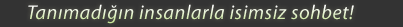
<style>
.page{position:relative;width:403px;height:27px;background:#333333}
.page>*{position:absolute;margin:0}
.t1{font:20px "MyriadPro-It";letter-spacing:0.03em}
</style>
<div class="page">
<p class="t1" style="left:28px;top:4px;width:326px;height:20px">Tanımadığın insanlarla isimsiz sohbet!</p>
</div>
